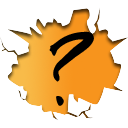
<style>
.page{position:relative;width:128px;height:128px;background:#ffffff}
.page>*{position:absolute;margin:0}
.t1{font:89.2px "IgnitetheLight";color:#000000;scale:0.95 1}
</style>
<div class="page">
<p class="t1" style="left:49px;top:31px;width:45px;height:75px">?</p>
</div>
